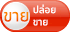
<style>
.page{position:relative;width:70px;height:32px}
.page>*{position:absolute;margin:0}
.t1{font:10px "NotoSansThai-Regular";color:#ffffff}
.t2{font:17px "NotoSansThai-Regular"}
</style>
<div class="page">
<p class="t1" style="left:33px;top:4px;width:23px;height:22px">ปล่อย<br>ขาย</p>
<p class="t2" style="left:4px;top:11px;width:25px;height:11px">ขาย</p>
</div>
